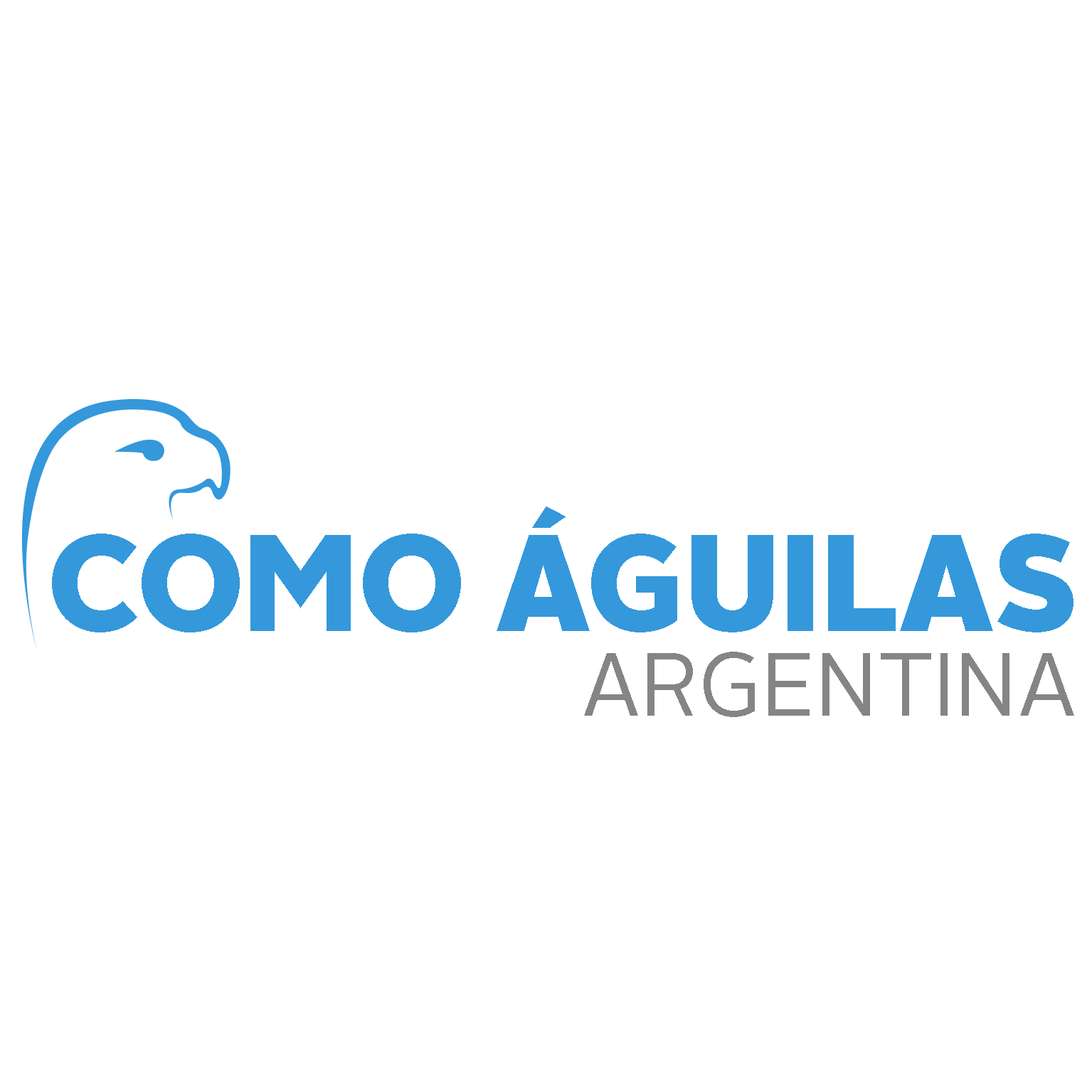
<style>
.page{position:relative;width:1092px;height:1092px;background:#ffffff}
.page>*{position:absolute;margin:0}
.t1{font:136.9px "AlrightSans-Black";color:#3498db;scale:0.97 1}
.t2{font:88.9px "AlrightSans-Regular";color:#858585;scale:0.96 1}
</style>
<div class="page">
<p class="t1" style="left:52px;top:507px;width:1021px;height:125px">COMO ÁGUILAS</p>
<p class="t2" style="left:584px;top:652px;width:490px;height:65px">ARGENTINA</p>
</div>
